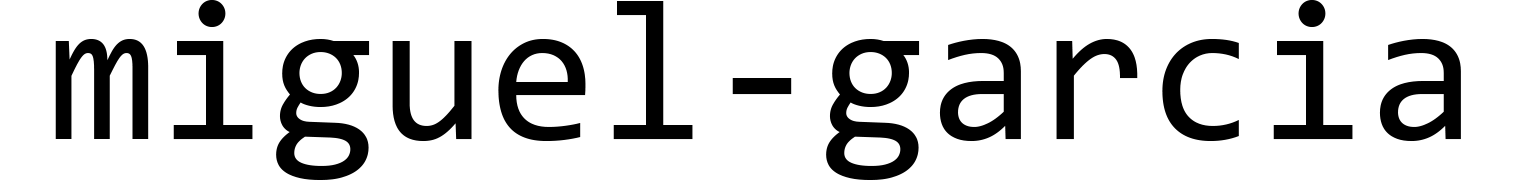
<style>
.page{position:relative;width:1521px;height:180px;background:#ffffff}
.page>*{position:absolute;margin:0}
.t1{font:200px "Consolas";color:#000000}
</style>
<div class="page">
<p class="t1" style="left:55px;top:0px;width:1406px;height:180px">miguel-garcia</p>
</div>
